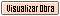
<style>
.page{position:relative;width:60px;height:16px;background:#ffd8bf}
.page>*{position:absolute;margin:0}
.t1{font:9px "Impact";color:#000000;scale:0.9 1}
</style>
<div class="page">
<p class="t1" style="left:7px;top:5px;width:47px;height:7px">Visualizar Obra</p>
</div>
